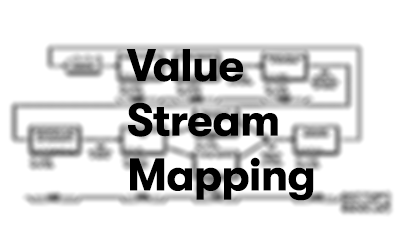
<style>
.page{position:relative;width:400px;height:250px;background:#ffffff}
.page>*{position:absolute;margin:0}
.t1{font:45.6px "GTWalsheim-Bold";letter-spacing:-0.02em;color:#000000}
</style>
<div class="page">
<p class="t1" style="left:126px;top:49px;width:188px;height:152px">Value<br>Stream<br>Mapping</p>
</div>
